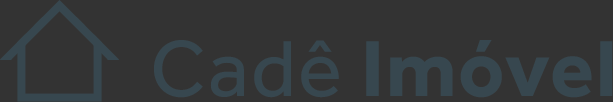
<style>
.page{position:relative;width:613px;height:102px;background:#333333}
.page>*{position:absolute;margin:0}
.t1{font:82px "Effra-Bold";letter-spacing:0.025em;color:#37474f}
.t2{font:82px "Effra-Regular";letter-spacing:0.025em;color:#37474f}
</style>
<div class="page">
<p class="t1" style="left:154px;top:40px;width:459px;height:58px"><span class="t2">Cadê </span>Imóvel</p>
</div>
